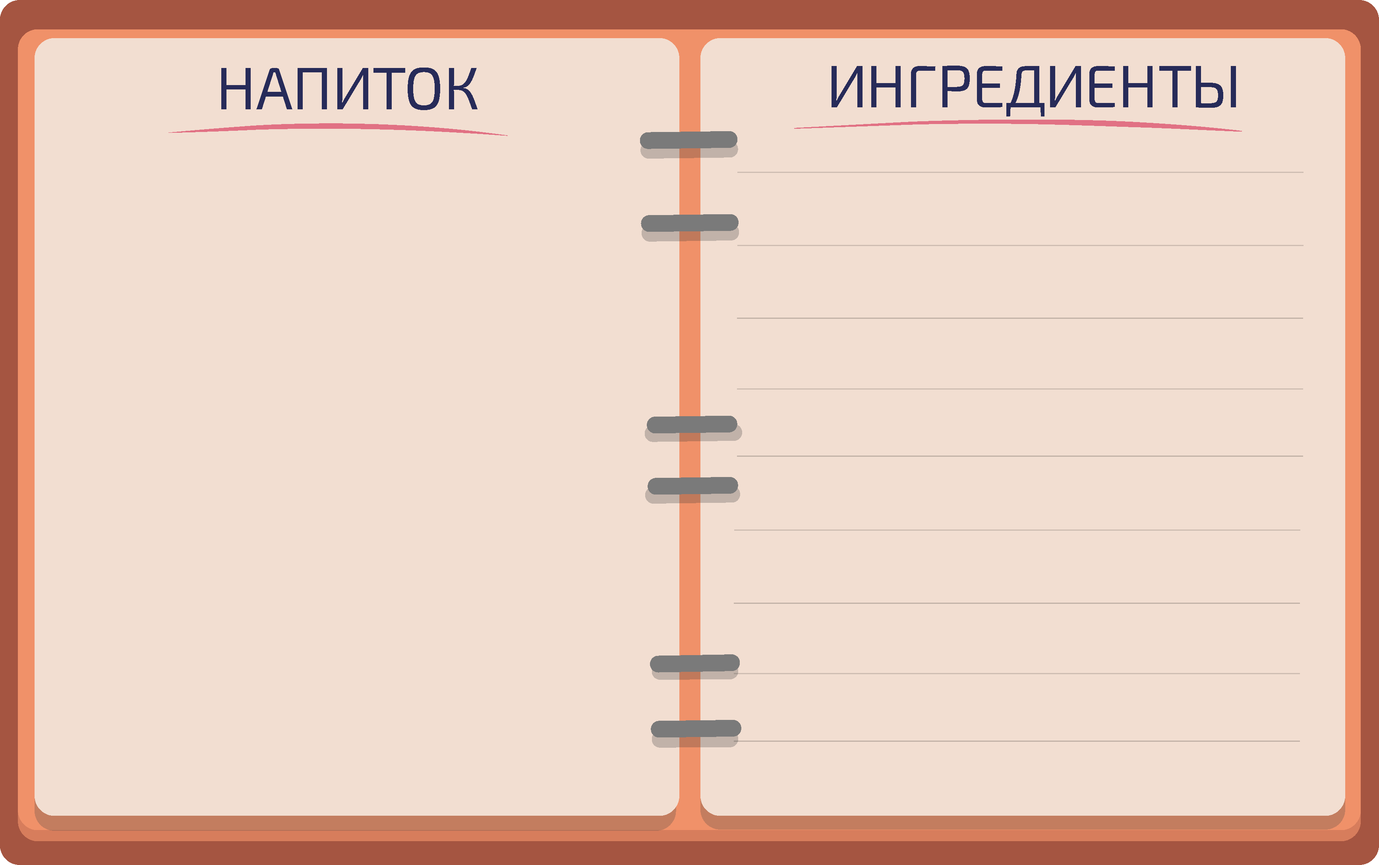
<style>
.page{position:relative;width:1379px;height:865px;background:#f2ded1}
.page>*{position:absolute;margin:0}
.t1{font:59.6px "Exo2-Regular";color:#282b59;text-transform:uppercase}
</style>
<div class="page">
<p class="t1" style="left:832px;top:66px;width:404px;height:50px">ингредиенты</p>
<p class="t1" style="left:221px;top:68px;width:257px;height:42px">напиток</p>
</div>
